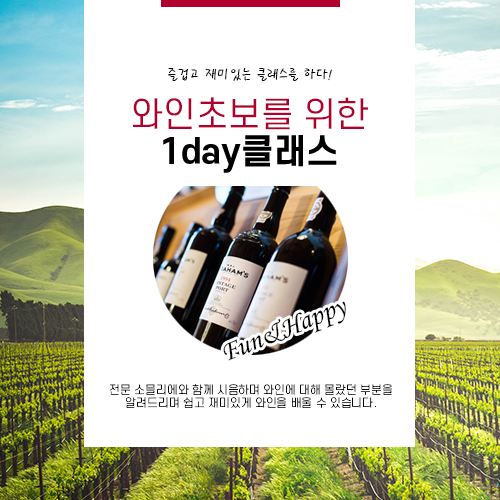
<style>
.page{position:relative;width:500px;height:500px;background:#ffffff}
.page>*{position:absolute;margin:0}
.t1{font:14px "PyunjiR-HM";color:#000000}
.t2{font:34px "S-CoreDream-4Regular";color:#b2002e}
.t3{font:28.3px "MonotypeCorsiva";color:#000000}
.t4{font:11.3px "S-CoreDream-2ExtraLight";color:#000000}
</style>
<div class="page">
<p class="t1" style="left:168px;top:68px;width:164px;height:13px">즐겁고 재미있는 클래스를 하다!</p>
<p class="t2" style="left:133px;top:97px;width:235px;height:33px">와인초보를 위한</p>
<p class="t3" style="left:223px;top:301px;width:123px;height:60px;rotate:-22deg">Fun&amp;Happy</p>
<p class="t4" style="left:110px;top:384px;width:282px;height:24px;text-align:center">전문 소믈리에와 함께 시음하며 와인에 대해 몰랐던 부분을<br>알려드리며 쉽고 재미있게 와인을 배울 수 있습니다.</p>
</div>
